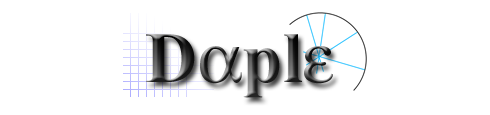
<style>
.page{position:relative;width:490px;height:115px;background:#ffffff}
.page>*{position:absolute;margin:0}
.t1{font:72px "TimesNewRomanPS-BoldMT"}
.t2{font:72px "Symbol"}
</style>
<div class="page">
<p class="t1" style="left:146px;top:34px;width:187px;height:64px">D<span class="t2">a</span>pl<span class="t2">e</span></p>
</div>
